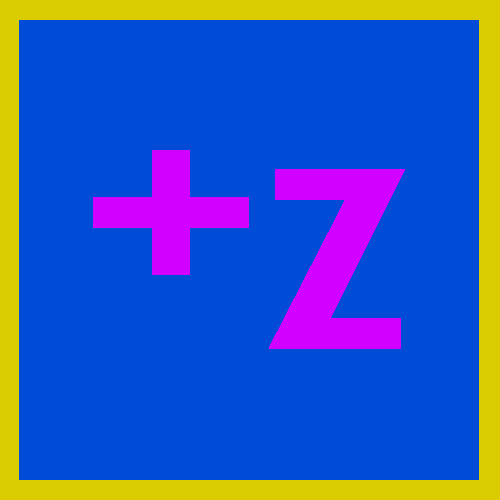
<style>
.page{position:relative;width:500px;height:500px;background:#004cd6}
.page>*{position:absolute;margin:0}
.t1{font:353px "Futura-CondensedMedium";color:#d200ff;scale:1.25 1}
</style>
<div class="page">
<p class="t1" style="left:93px;top:150px;width:312px;height:199px">+z</p>
</div>
